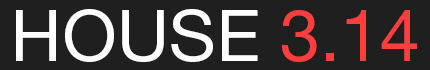
<style>
.page{position:relative;width:430px;height:70px;background:#1f1f1f}
.page>*{position:absolute;margin:0}
.t1{font:72px "HelveticaNeueLTPro-Roman";color:#ffffff}
.t2{font:72px "HelveticaNeueLTPro-Roman";color:#ff3f3f}
</style>
<div class="page">
<p class="t1" style="left:16px;top:9px;width:401px;height:53px">HOUSE <span class="t2">3.14</span></p>
</div>
